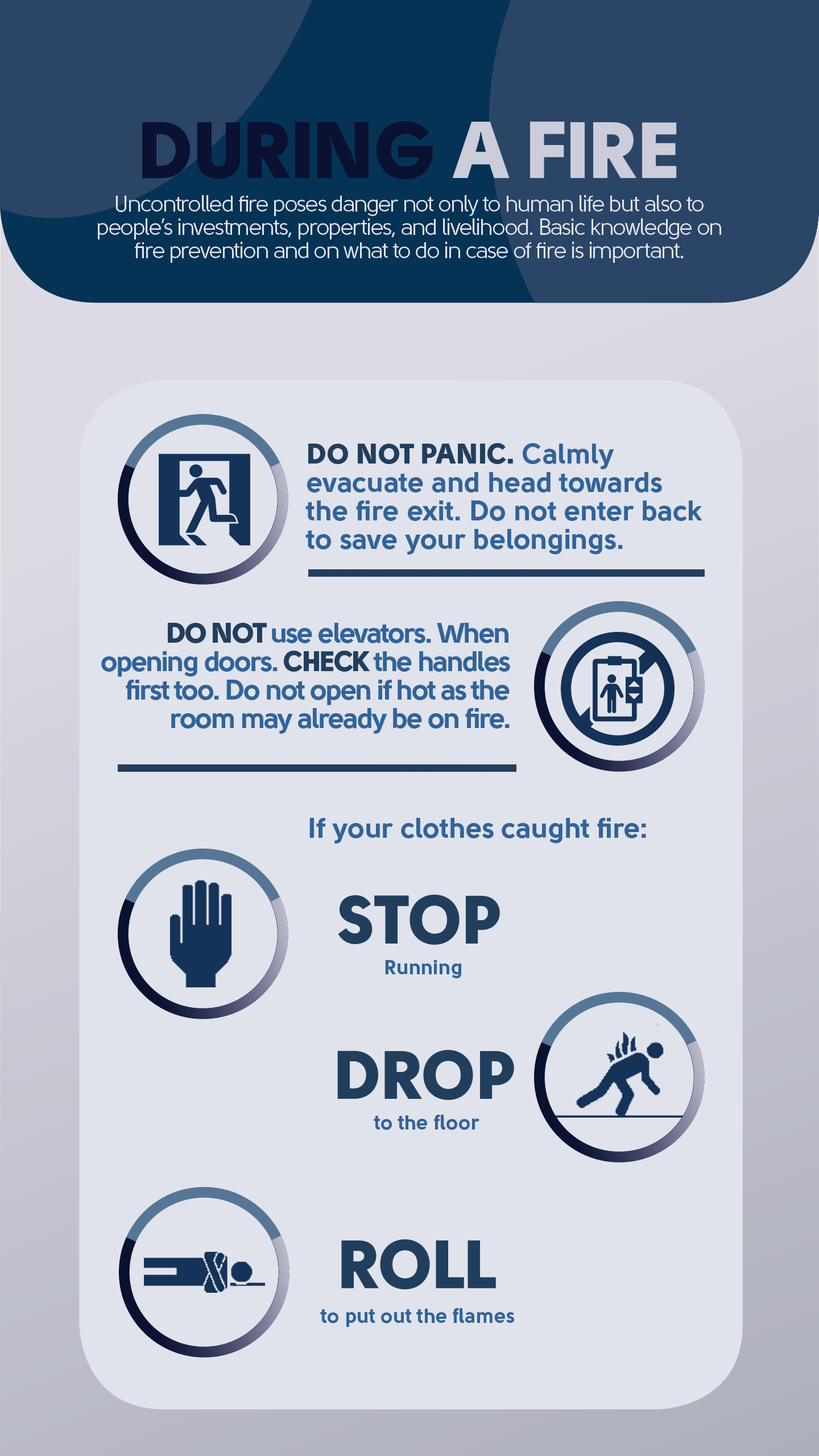
<style>
.page{position:relative;width:819px;height:1456px;background:#e0e3ec}
.page>*{position:absolute;margin:0}
.t1{font:28.4px/28.4px "Solomon-Sans-Bold";color:#326399}
.t2{font:28.4px/28.4px "Solomon-Sans-Black";color:#223e5d}
.t3{font:28.4px/28.4px "Solomon-Sans-Bold";letter-spacing:-0.05em;color:#326399}
.t4{font:28.4px/28.4px "Solomon-Sans-Black";letter-spacing:-0.05em;color:#223e5d}
.t5{font:28.4px "Solomon-Sans-Bold";color:#326399}
.t6{font:68.2px "Solomon-Sans-Black";color:#223e5d}
.t7{font:20.5px "Solomon-Sans-Bold";color:#326399}
</style>
<div class="page">
<p class="t1" style="left:305px;top:443px;width:397px;height:112px"><span class="t2">DO NOT PANIC. </span>Calmly<br>evacuate and head towards<br>the fire exit. Do not enter back<br>to save your belongings.</p>
<p class="t3" style="left:101px;top:623px;width:409px;height:111px;text-align:right"><span class="t4">DO NOT </span>use elevators. When<br>opening doors. <span class="t4">CHECK </span>the handles<br>first too. Do not open if hot as the<br>room may already be on fire.</p>
<p class="t5" style="left:309px;top:818px;width:337px;height:25px">If your clothes caught fire:</p>
<p class="t6" style="left:338px;top:895px;width:162px;height:50px">STOP</p>
<p class="t7" style="left:385px;top:960px;width:76px;height:18px">Running</p>
<p class="t6" style="left:337px;top:1050px;width:177px;height:50px">DROP</p>
<p class="t7" style="left:374px;top:1115px;width:105px;height:15px">to the floor</p>
<p class="t6" style="left:341px;top:1239px;width:155px;height:50px">ROLL</p>
<p class="t7" style="left:320px;top:1308px;width:194px;height:19px">to put out the flames</p>
</div>
